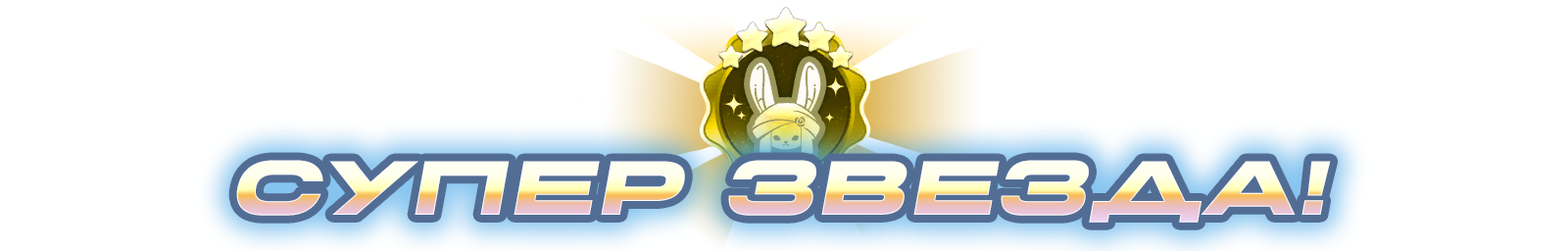
<style>
.page{position:relative;width:1568px;height:251px;background:#ffffff}
.page>*{position:absolute;margin:0}
.t1{font:76.4px "MiedingerRus-Bold";letter-spacing:0.05em;font-style:italic}
</style>
<div class="page">
<p class="t1" style="left:236px;top:160px;width:1095px;height:62px">Cупер звезда!</p>
</div>
